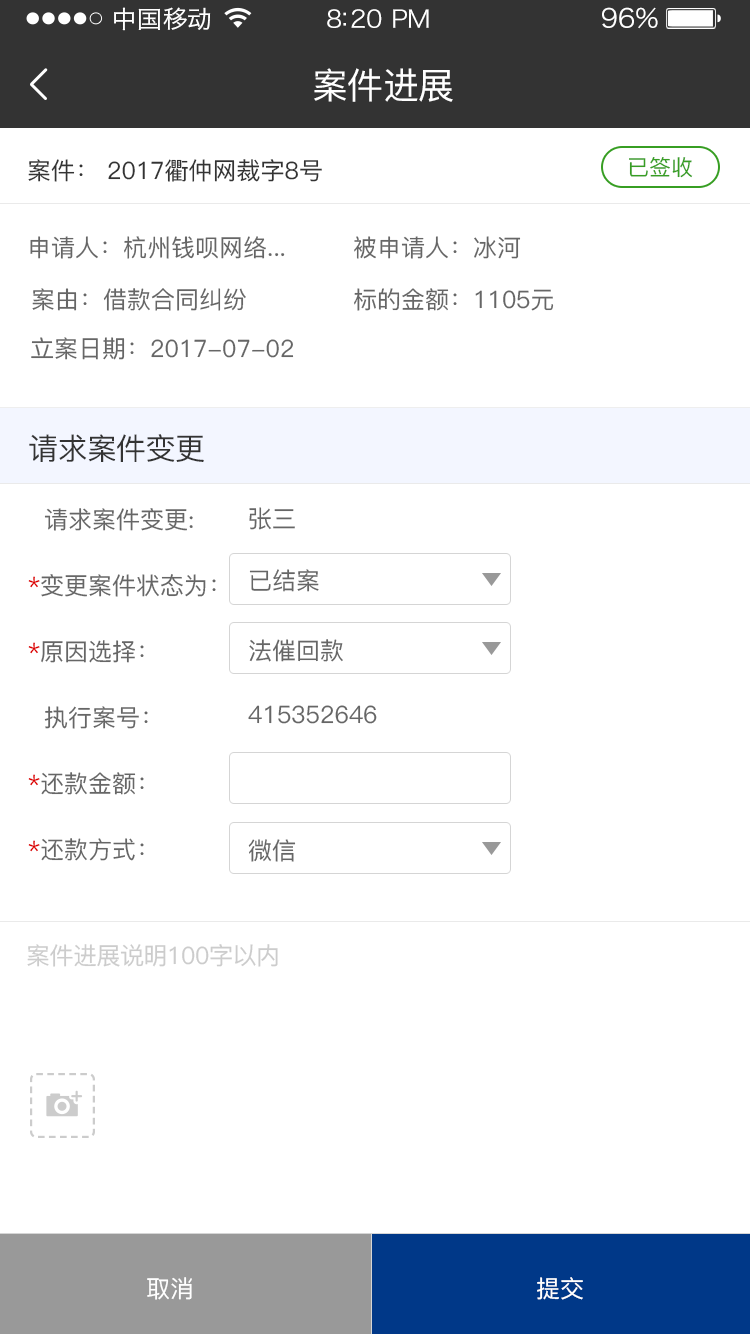
<style>
.page{position:relative;width:750px;height:1334px;background:#ffffff}
.page>*{position:absolute;margin:0}
.t1{font:24px "HiraginoSansGB-W3";letter-spacing:0.02em;color:#ffffff;scale:1.03 1}
.t2{font:24px "HiraginoSansGB-W3";letter-spacing:-0.02em;color:#ffffff;scale:1.03 1}
.t3{font:26.2px "HiraginoSansGB-W3";letter-spacing:-0.02em;color:#ffffff;scale:1.03 1}
.t4{font:36px "PingFang-SC-Medium";letter-spacing:-0.02em;color:#ffffff}
.t5{font:24px "PingFang-SC-Medium";color:#333333}
.t6{font:22px "PingFang-SC-Medium";color:#379e23}
.t7{font:24px "PingFang-SC-Medium";color:#666666}
.t8{font:30px "PingFang-SC-Medium";letter-spacing:-0.02em;color:#333333}
.t9{font:24px/66px "PingFang-SC-Medium";color:#666666}
.t10{font:24px/66px "PingFang-SC-Medium";color:#de0101}
.t11{font:24px "PingFang-SC-Medium";letter-spacing:-0.02em;color:#cccccc}
.t12{font:24px "PingFang-SC-Medium";color:#ffffff}
</style>
<div class="page">
<p class="t1" style="left:114px;top:7px;width:97px;height:24px">中国移动</p>
<p class="t2" style="left:327px;top:9px;width:102px;height:19px">8:20 PM</p>
<p class="t3" style="left:602px;top:7px;width:56px;height:22px">96%</p>
<p class="t4" style="left:314px;top:68px;width:139px;height:34px">案件进展</p>
<p class="t5" style="left:28px;top:159px;width:294px;height:23px">案件： 2017衢仲网裁字8号</p>
<p class="t6" style="left:629px;top:157px;width:64px;height:21px">已签收</p>
<p class="t7" style="left:30px;top:236px;width:255px;height:23px">申请人：杭州钱呗网络...</p>
<p class="t7" style="left:354px;top:236px;width:167px;height:23px">被申请人：冰河</p>
<p class="t7" style="left:32px;top:288px;width:214px;height:23px">案由：借款合同纠纷</p>
<p class="t7" style="left:354px;top:288px;width:200px;height:23px">标的金额：1105元</p>
<p class="t7" style="left:31px;top:337px;width:263px;height:23px">立案日期：2017-07-02</p>
<p class="t8" style="left:29px;top:434px;width:175px;height:28px">请求案件变更</p>
<p class="t9" style="left:28px;top:508px;width:188px;height:353px">请求案件变更:<br><span class="t10">*</span>变更案件状态为：<br><span class="t10">*</span>原因选择：<br>  执行案号：<br><span class="t10">*</span>还款金额：<br><span class="t10">*</span>还款方式：</p>
<p class="t7" style="left:249px;top:507px;width:46px;height:23px">张三</p>
<p class="t7" style="left:249px;top:569px;width:70px;height:23px">已结案</p>
<p class="t7" style="left:249px;top:639px;width:94px;height:23px">法催回款</p>
<p class="t7" style="left:248px;top:705px;width:129px;height:19px">415352646</p>
<p class="t7" style="left:248px;top:839px;width:48px;height:23px">微信</p>
<p class="t11" style="left:27px;top:944px;width:251px;height:23px">案件进展说明100字以内</p>
<p class="t12" style="left:147px;top:1277px;width:45px;height:23px">取消</p>
<p class="t12" style="left:537px;top:1277px;width:46px;height:23px">提交</p>
</div>
